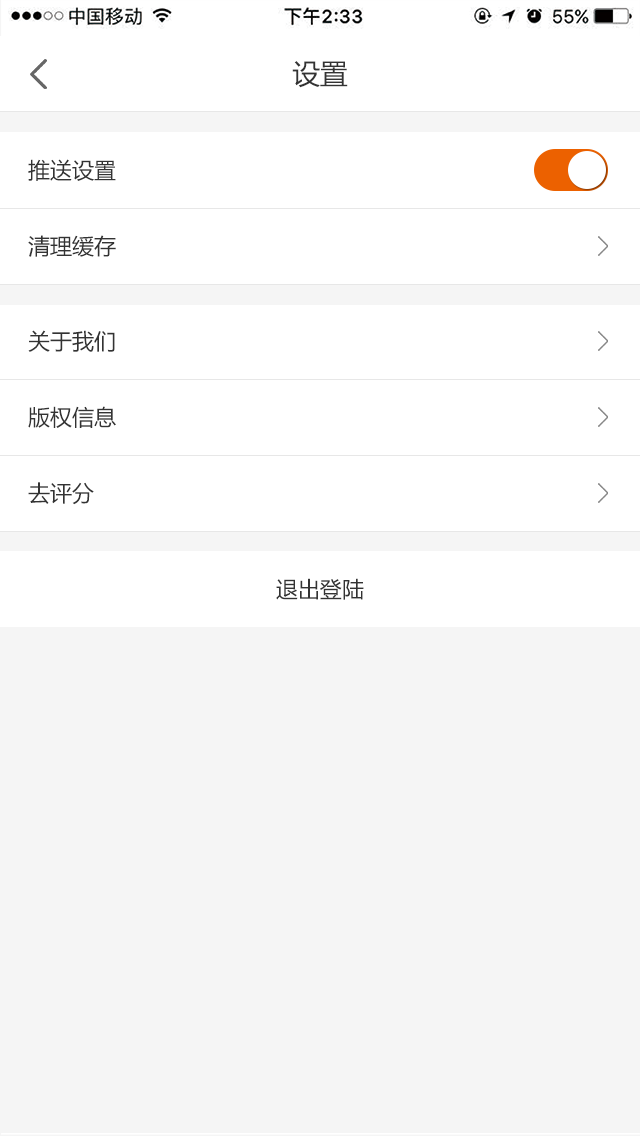
<style>
.page{position:relative;width:640px;height:1136px;background:#f5f5f5}
.page>*{position:absolute;margin:0}
.t1{font:28px "MicrosoftYaHei";color:#333333}
.t2{font:22px "MicrosoftYaHei";color:#333333}
</style>
<div class="page">
<p class="t1" style="left:292px;top:61px;width:56px;height:27px">设置</p>
<p class="t2" style="left:28px;top:159px;width:88px;height:22px">推送设置</p>
<p class="t2" style="left:28px;top:235px;width:88px;height:22px">清理缓存</p>
<p class="t2" style="left:28px;top:330px;width:87px;height:22px">关于我们</p>
<p class="t2" style="left:28px;top:406px;width:88px;height:22px">版权信息</p>
<p class="t2" style="left:28px;top:482px;width:66px;height:23px">去评分</p>
<p class="t2" style="left:276px;top:578px;width:88px;height:22px">退出登陆</p>
</div>
